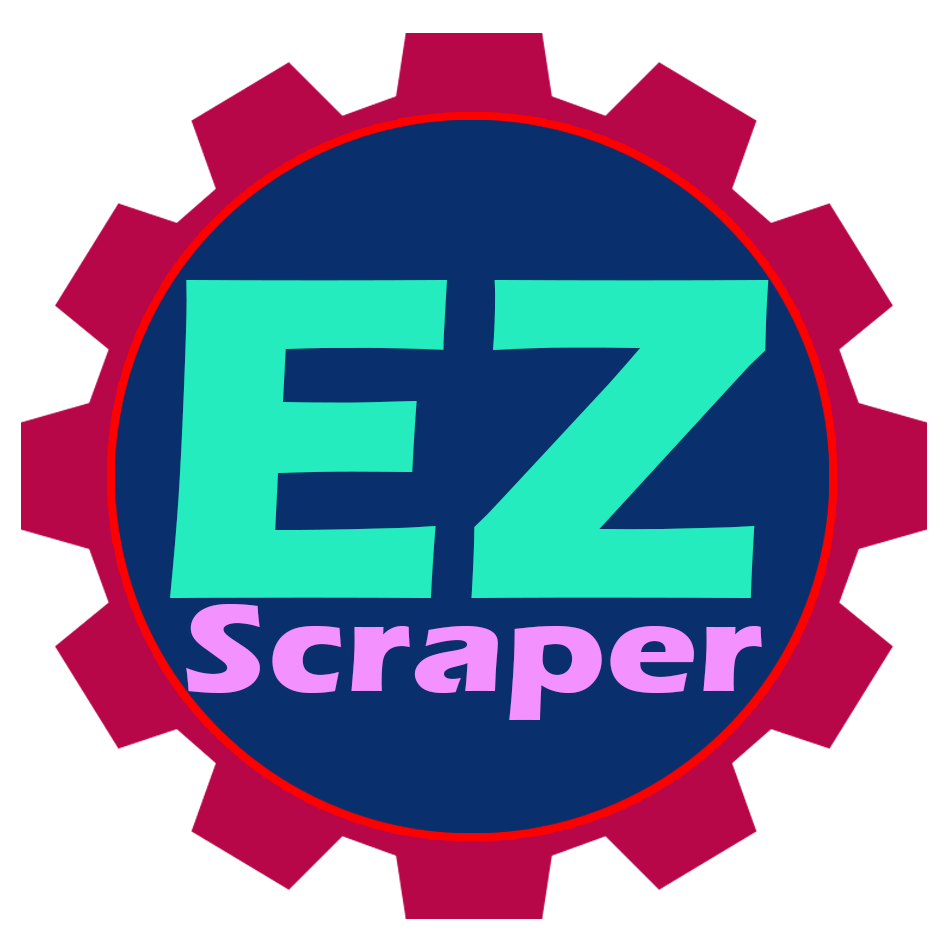
<style>
.page{position:relative;width:947px;height:947px;background:#ffffff}
.page>*{position:absolute;margin:0}
.t1{font:477.1px "ErasITC-Bold";color:#24ecbf}
.t2{font:127.8px "ErasITC-Bold";color:#f291ff;scale:1.21 1}
</style>
<div class="page">
<p class="t1" style="left:170px;top:280px;width:599px;height:318px">EZ</p>
<p class="t2" style="left:186px;top:604px;width:576px;height:116px">Scraper</p>
</div>
